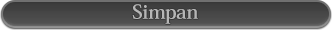
<style>
.page{position:relative;width:332px;height:30px}
.page>*{position:absolute;margin:0}
.t1{font:20px "HeiseiMinStd-W7";color:#b6b6b6}
</style>
<div class="page">
<p class="t1" style="left:132px;top:4px;width:66px;height:20px">Simpan</p>
</div>
